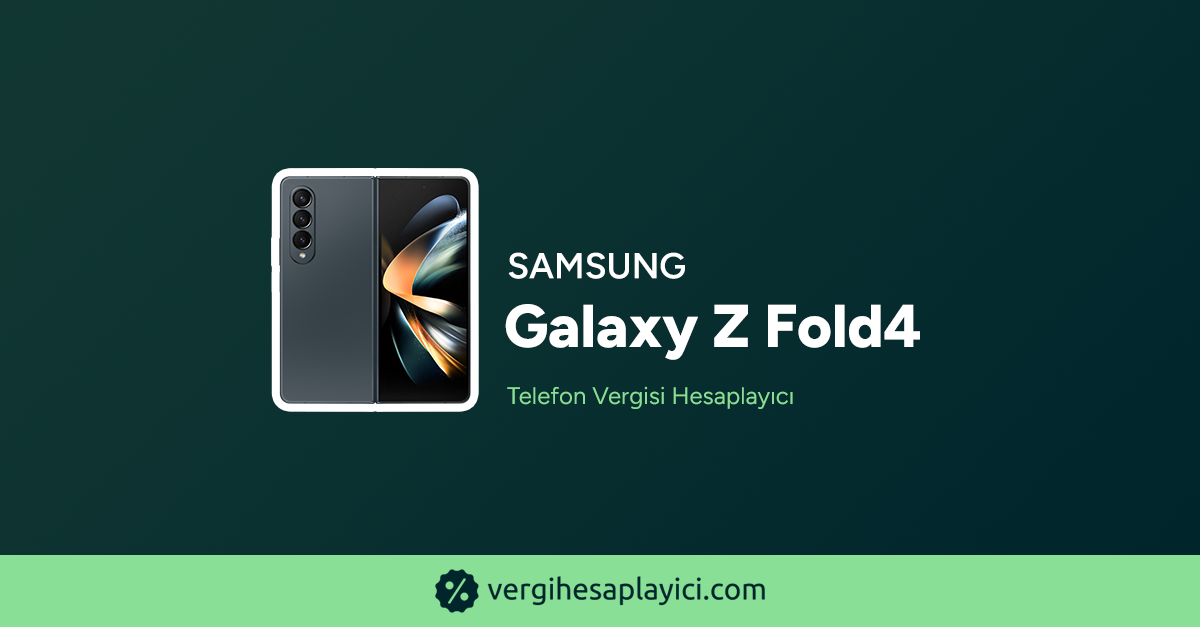
<style>
.page{position:relative;width:1200px;height:627px}
.page>*{position:absolute;margin:0}
.t1{font:36px "Figtree-SemiBold";color:#ffffff;text-transform:uppercase;font-weight:bold}
.t2{font:60.3px "Figtree-ExtraBold";color:#ffffff;font-weight:bold}
.t3{font:24px "Figtree-Regular";color:#88df95;font-weight:bold}
</style>
<div class="page">
<p class="t1" style="left:508px;top:252px;width:177px;height:27px">Samsung</p>
<p class="t2" style="left:505px;top:304px;width:415px;height:56px">Galaxy Z Fold4</p>
<p class="t3" style="left:507px;top:386px;width:286px;height:23px">Telefon Vergisi Hesaplayıcı</p>
</div>
